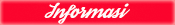
<style>
.page{position:relative;width:175px;height:25px;background:#fb042d}
.page>*{position:absolute;margin:0}
.t1{font:14.2px "Streetwear";color:#fdfcfc;scale:1.07 1}
</style>
<div class="page">
<p class="t1" style="left:44px;top:2px;width:86px;height:22px">Informasi</p>
</div>
